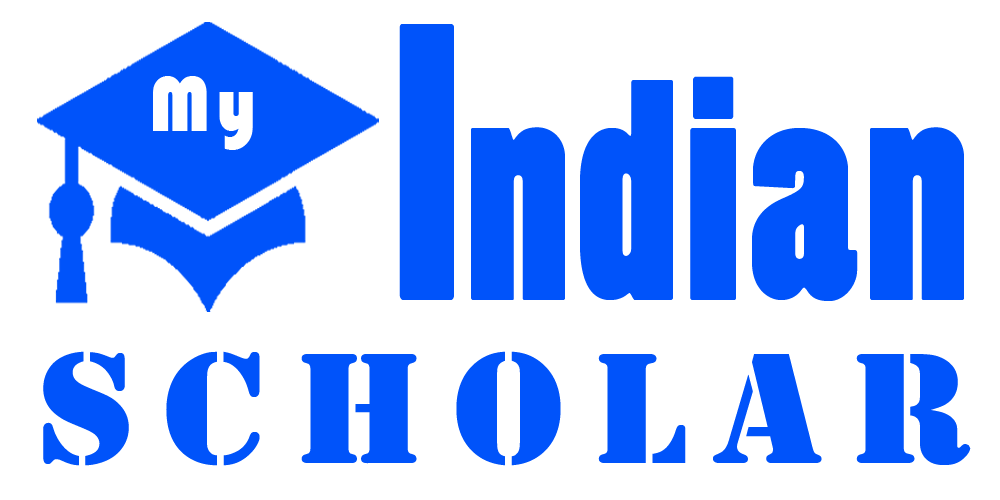
<style>
.page{position:relative;width:1000px;height:500px;background:#ffffff}
.page>*{position:absolute;margin:0}
.t1{font:287.3px "PoplarStd";letter-spacing:0.02em;color:#0053fa}
.t2{font:367.7px "PoplarStd";letter-spacing:0.02em;color:#0053fa;scale:0.77 1}
.t3{font:81.2px "Bauhaus93";letter-spacing:0.06em;color:#ffffff;scale:0.94 1}
.t4{font:163.1px "Stencil";letter-spacing:0.16em;color:#0053fa;scale:1.07 1}
</style>
<div class="page">
<p class="t1" style="left:399px;top:24px;width:565px;height:277px"><span class="t2">I</span>ndian</p>
<p class="t3" style="left:153px;top:76px;width:100px;height:74px">My</p>
<p class="t4" style="left:43px;top:351px;width:928px;height:115px">ScholaR</p>
</div>
